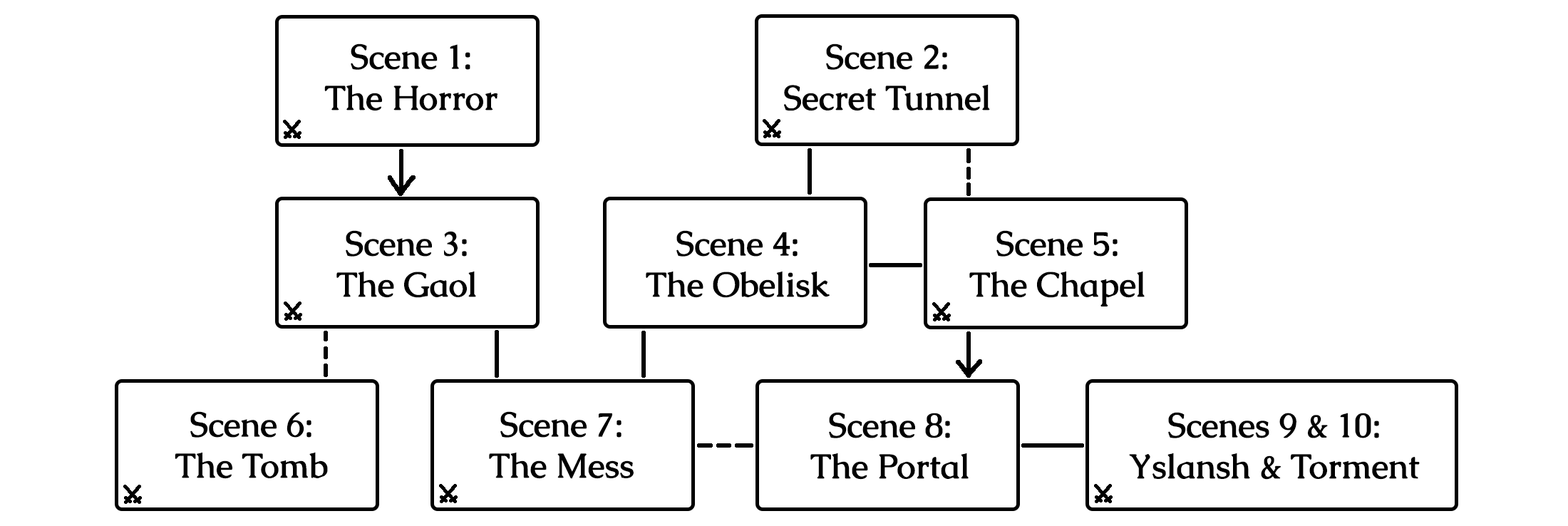
<style>
.page{position:relative;width:1568px;height:526px;background:#ffffff}
.page>*{position:absolute;margin:0}
.t1{font:34.2px "Caudex-Bold";color:#000000}
</style>
<div class="page">
<p class="t1" style="left:324px;top:43px;width:173px;height:68px;text-align:center">Scene 1:<br>The Horror</p>
<p class="t1" style="left:784px;top:43px;width:206px;height:68px;text-align:center">Scene 2:<br>Secret Tunnel</p>
<p class="t1" style="left:336px;top:230px;width:140px;height:68px;text-align:center">Scene 3:<br>The Gaol</p>
<p class="t1" style="left:646px;top:230px;width:184px;height:68px;text-align:center">Scene 4:<br>The Obelisk</p>
<p class="t1" style="left:969px;top:230px;width:176px;height:76px;text-align:center">Scene 5:<br>The Chapel</p>
<p class="t1" style="left:175px;top:411px;width:153px;height:68px;text-align:center">Scene 6:<br>The Tomb</p>
<p class="t1" style="left:489px;top:411px;width:145px;height:68px;text-align:center">Scene 7:<br>The Mess</p>
<p class="t1" style="left:810px;top:412px;width:159px;height:68px;text-align:center">Scene 8:<br>The Portal</p>
<p class="t1" style="left:1129px;top:412px;width:291px;height:68px;text-align:center">Scenes 9 &amp; 10:<br>Yslansh &amp; Torment</p>
</div>
